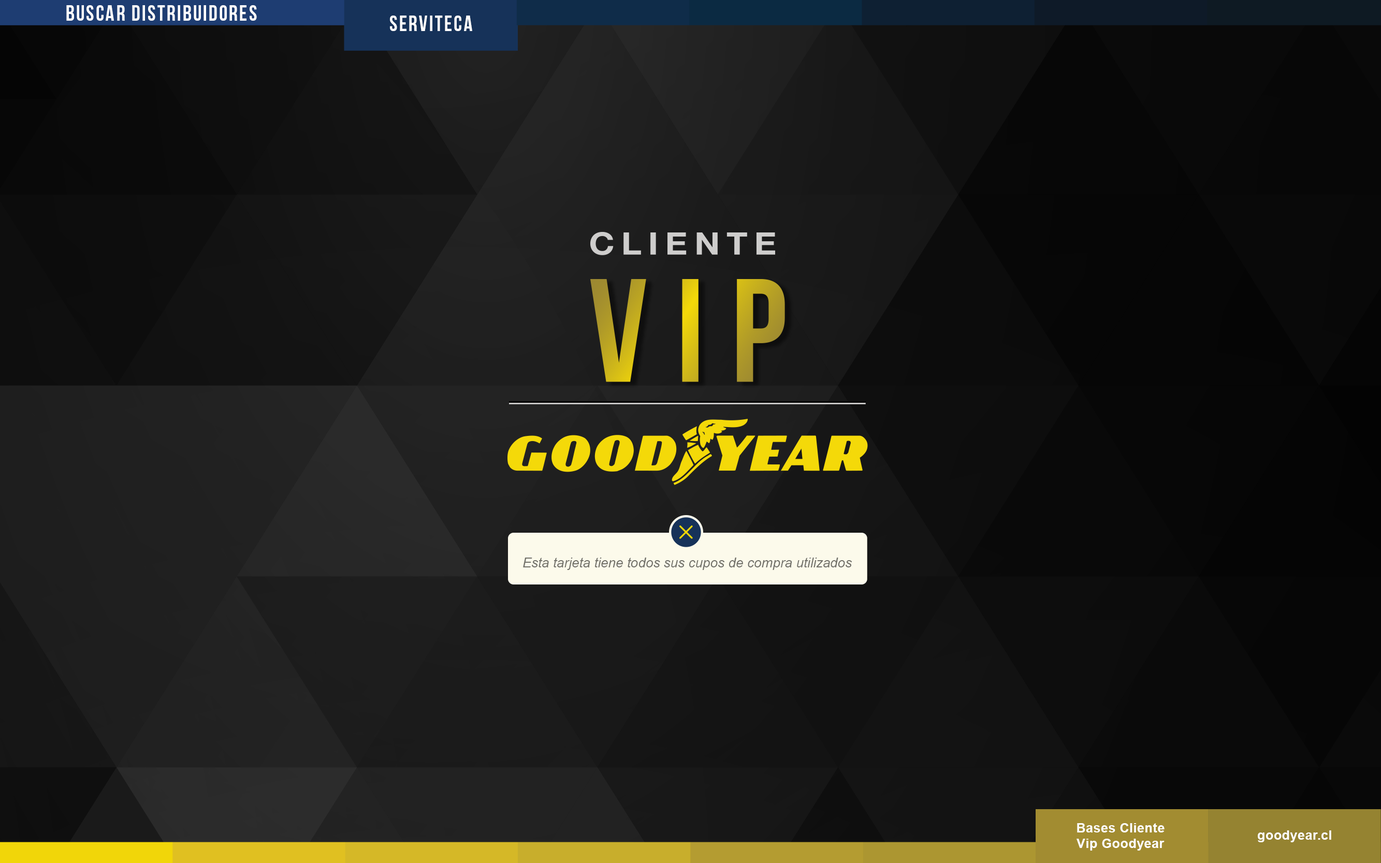
<style>
.page{position:relative;width:1381px;height:863px}
.page>*{position:absolute;margin:0}
.t1{font:21.6px "BebasNeue";letter-spacing:0.075em;color:#ffffff}
.t2{font:13.6px "Arial-ItalicMT";color:#72716a}
.t3{font:12.9px "Arial-BoldMT";letter-spacing:0.025em;color:#ffffff}
</style>
<div class="page">
<p class="t1" style="left:66px;top:5px;width:191px;height:16px">BUSCAR DIStribuidores</p>
<p class="t1" style="left:390px;top:16px;width:82px;height:15px">SERVITECA</p>
<p class="t2" style="left:523px;top:558px;width:329px;height:12px">Esta tarjeta tiene todos sus cupos de compra utilizados</p>
<p class="t3" style="left:1077px;top:823px;width:88px;height:28px;text-align:center">Bases Cliente<br>Vip Goodyear</p>
<p class="t3" style="left:1258px;top:831px;width:73px;height:12px">goodyear.cl</p>
</div>
